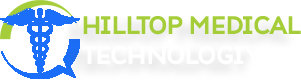
<style>
.page{position:relative;width:301px;height:80px;background:#ffffff}
.page>*{position:absolute;margin:0}
.t1{font:25px "AtozimpleExtraBold";color:#a5cd39}
.t2{font:25px "AtozimpleExtraBold";color:#ffffff}
</style>
<div class="page">
<p class="t1" style="left:82px;top:16px;width:219px;height:49px">HILLTOP MEDICAL<br><span class="t2">TECHNOLOGIY</span></p>
</div>
